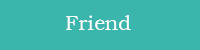
<style>
.page{position:relative;width:200px;height:50px;background:#3ab6ac}
.page>*{position:absolute;margin:0}
.t1{font:20.8px "STZhongsong";color:#ffffff}
</style>
<div class="page">
<p class="t1" style="left:66px;top:15px;width:65px;height:15px">Friend</p>
</div>
